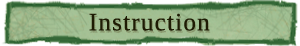
<style>
.page{position:relative;width:300px;height:46px}
.page>*{position:absolute;margin:0}
.t1{font:25px "Tinos";letter-spacing:0.05em;color:#1e1b04}
</style>
<div class="page">
<p class="t1" style="left:89px;top:13px;width:121px;height:18px">Instruction</p>
</div>
